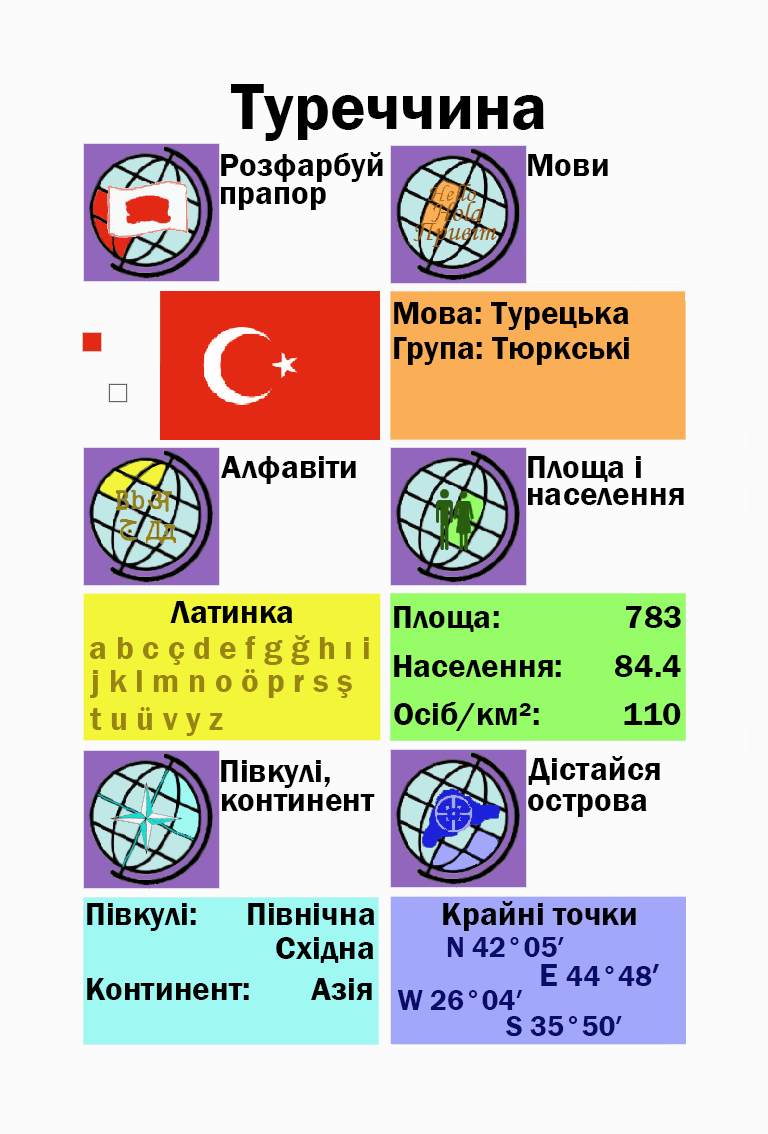
<style>
.page{position:relative;width:768px;height:1134px;background:#fbfbfb}
.page>*{position:absolute;margin:0}
.t1{font:66.7px "FranklinGothic-Demi";color:#000000}
.t2{font:33.3px "FranklinGothic-Demi";color:#000000}
.t3{font:33.3px "FranklinGothic-Demi";color:#000003}
.t4{font:33.3px "FranklinGothic-Demi";color:#988413}
.t5{font:29.2px "FranklinGothic-Demi";color:#988413}
.t6{font:29.2px "FranklinGothic-Demi";color:#090c69}
.t7{font:33.3px "FranklinGothic-Demi";color:#090c69}
</style>
<div class="page">
<p class="t1" style="left:231px;top:84px;width:313px;height:57px">Туреччина</p>
<p class="t2" style="left:221px;top:152px;width:162px;height:30px">Розфарбуй</p>
<p class="t2" style="left:528px;top:154px;width:80px;height:22px">Мови</p>
<p class="t2" style="left:221px;top:187px;width:105px;height:23px">прапор</p>
<p class="t2" style="left:394px;top:302px;width:235px;height:28px">Мова: Турецька</p>
<p class="t2" style="left:394px;top:337px;width:235px;height:28px">Група: Тюркські</p>
<p class="t2" style="left:221px;top:456px;width:135px;height:28px">Алфавіти</p>
<p class="t2" style="left:528px;top:456px;width:113px;height:26px">Площа і</p>
<p class="t2" style="left:528px;top:488px;width:156px;height:17px">населення</p>
<p class="t2" style="left:170px;top:601px;width:123px;height:22px">Латинка</p>
<p class="t2" style="left:394px;top:606px;width:105px;height:26px">Площа:</p>
<p class="t3" style="left:625px;top:606px;width:56px;height:22px">783</p>
<p class="t4" style="left:90px;top:635px;width:279px;height:30px"><span class="t5"><br></span>a b c ç d e f g ğ h ı i</p>
<p class="t2" style="left:394px;top:655px;width:167px;height:22px">Населення:</p>
<p class="t2" style="left:615px;top:655px;width:66px;height:22px">84.4</p>
<p class="t4" style="left:90px;top:669px;width:262px;height:29px">j k l m n o ö p r s ş</p>
<p class="t2" style="left:394px;top:702px;width:145px;height:29px">Осіб/км²:</p>
<p class="t4" style="left:90px;top:707px;width:133px;height:29px">t u ü v y z</p>
<p class="t2" style="left:624px;top:703px;width:57px;height:22px">110</p>
<p class="t2" style="left:221px;top:760px;width:109px;height:28px">Півкулі,</p>
<p class="t2" style="left:528px;top:756px;width:132px;height:29px">Дістайся</p>
<p class="t2" style="left:222px;top:794px;width:153px;height:17px">континент</p>
<p class="t2" style="left:528px;top:794px;width:119px;height:23px">острова</p>
<p class="t2" style="left:87px;top:903px;width:109px;height:28px">Півкулі:</p>
<p class="t2" style="left:248px;top:903px;width:127px;height:22px">Північна</p>
<p class="t3" style="left:443px;top:901px;width:193px;height:30px">Крайні точки</p>
<p class="t2" style="left:276px;top:937px;width:98px;height:26px">Східна</p>
<p class="t6" style="left:447px;top:937px;width:117px;height:20px">N 42°05′</p>
<p class="t6" style="left:541px;top:964px;width:118px;height:22px"><span class="t7">E </span>44°48<span class="t7">′</span></p>
<p class="t2" style="left:87px;top:978px;width:162px;height:22px">Континент:</p>
<p class="t2" style="left:311px;top:978px;width:61px;height:22px">Азія</p>
<p class="t6" style="left:397px;top:990px;width:126px;height:20px">W 26°04′</p>
<p class="t6" style="left:506px;top:1016px;width:116px;height:21px">S 35°50′</p>
</div>
